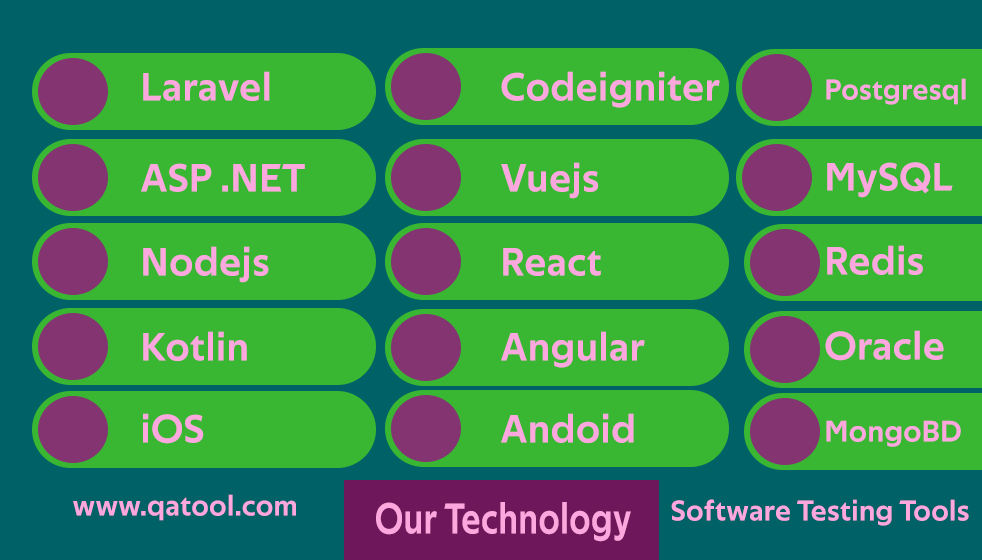
<style>
.page{position:relative;width:982px;height:560px;background:#39b733}
.page>*{position:absolute;margin:0}
.t1{font:40px "TechnaSans-Regular";letter-spacing:0.025em;color:#fda7df}
.t2{font:29px "TechnaSans-Regular";letter-spacing:0.025em;color:#fda7df}
.t3{font:30px "TechnaSans-Regular";letter-spacing:0.025em;color:#fda7df}
.t4{font:43.8px "TechnaSans-Regular";letter-spacing:0.025em;color:#fda7df;scale:0.8 1}
</style>
<div class="page">
<p class="t1" style="left:143px;top:71px;width:127px;height:30px">Laravel</p>
<p class="t1" style="left:501px;top:71px;width:219px;height:37px">Codeigniter</p>
<p class="t2" style="left:826px;top:78px;width:140px;height:27px">Postgresql</p>
<p class="t1" style="left:141px;top:163px;width:164px;height:29px">ASP .NET</p>
<p class="t1" style="left:501px;top:162px;width:98px;height:37px">Vuejs</p>
<p class="t1" style="left:827px;top:162px;width:126px;height:36px">MySQL</p>
<p class="t1" style="left:143px;top:246px;width:126px;height:37px">Nodejs</p>
<p class="t1" style="left:827px;top:245px;width:96px;height:30px">Redis</p>
<p class="t1" style="left:503px;top:248px;width:98px;height:28px">React</p>
<p class="t1" style="left:143px;top:331px;width:104px;height:31px">Kotlin</p>
<p class="t1" style="left:501px;top:331px;width:144px;height:37px">Angular</p>
<p class="t1" style="left:825px;top:330px;width:119px;height:31px">Oracle</p>
<p class="t1" style="left:143px;top:413px;width:61px;height:31px">iOS</p>
<p class="t1" style="left:501px;top:413px;width:133px;height:31px">Andoid</p>
<p class="t3" style="left:826px;top:420px;width:135px;height:27px">MongoBD</p>
<p class="t2" style="left:73px;top:494px;width:223px;height:27px">www.qatool.com</p>
<p class="t4" style="left:376px;top:502px;width:255px;height:40px">Our Technology</p>
<p class="t2" style="left:671px;top:499px;width:298px;height:27px">Software Testing Tools</p>
</div>
